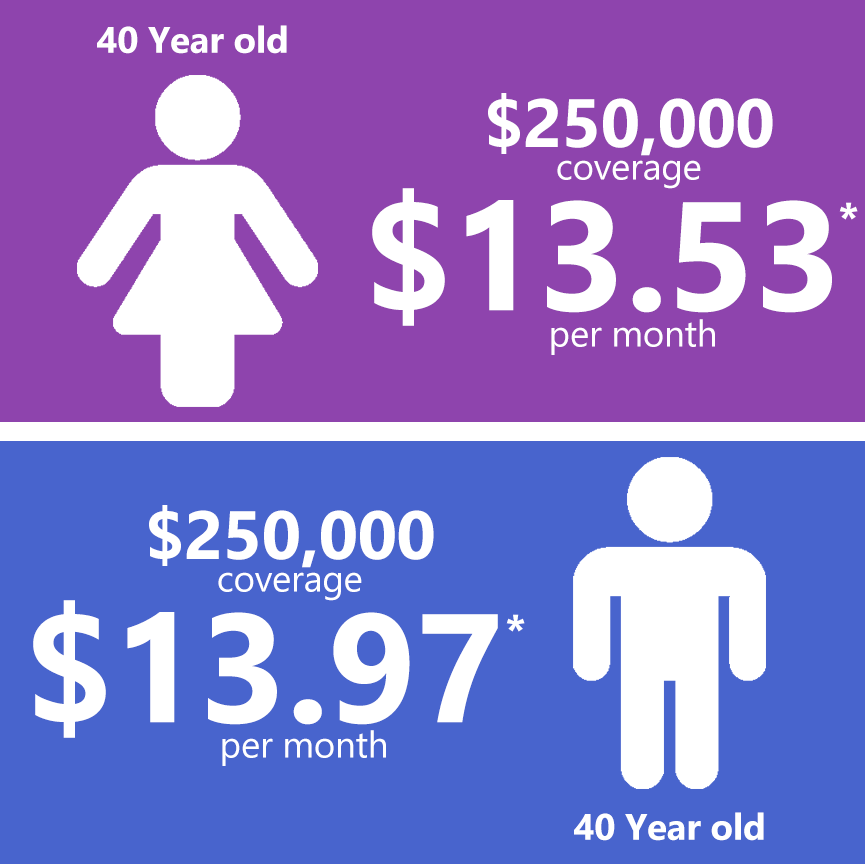
<style>
.page{position:relative;width:865px;height:864px;background:#4864cd}
.page>*{position:absolute;margin:0}
.t1{font:36.7px "Ebrima-Bold";letter-spacing:-0.005em;color:#ffffff}
.t2{font:68.2px "Ebrima-Bold";letter-spacing:-0.005em;color:#ffffff}
.t3{font:36.7px "Ebrima";letter-spacing:-0.005em;color:#ffffff}
.t4{font:153.6px "Ebrima-Bold";letter-spacing:-0.005em;color:#ffffff}
.t5{font:45.8px "Ebrima-Bold";letter-spacing:-0.005em;color:#ffffff}
</style>
<div class="page">
<p class="t1" style="left:97px;top:25px;width:190px;height:29px">40 Year old</p>
<p class="t2" style="left:488px;top:93px;width:285px;height:63px">$250,000</p>
<p class="t3" style="left:557px;top:160px;width:144px;height:29px">coverage</p>
<p class="t4" style="left:372px;top:188px;width:460px;height:138px">$13.53</p>
<p class="t5" style="left:839px;top:202px;width:19px;height:18px">*</p>
<p class="t3" style="left:551px;top:319px;width:164px;height:36px">per month</p>
<p class="t2" style="left:149px;top:505px;width:285px;height:63px">$250,000</p>
<p class="t3" style="left:218px;top:572px;width:144px;height:29px">coverage</p>
<p class="t4" style="left:33px;top:600px;width:465px;height:138px">$13.97</p>
<p class="t5" style="left:506px;top:614px;width:19px;height:18px">*</p>
<p class="t3" style="left:222px;top:730px;width:164px;height:36px">per month</p>
<p class="t1" style="left:574px;top:812px;width:190px;height:29px">40 Year old</p>
</div>
